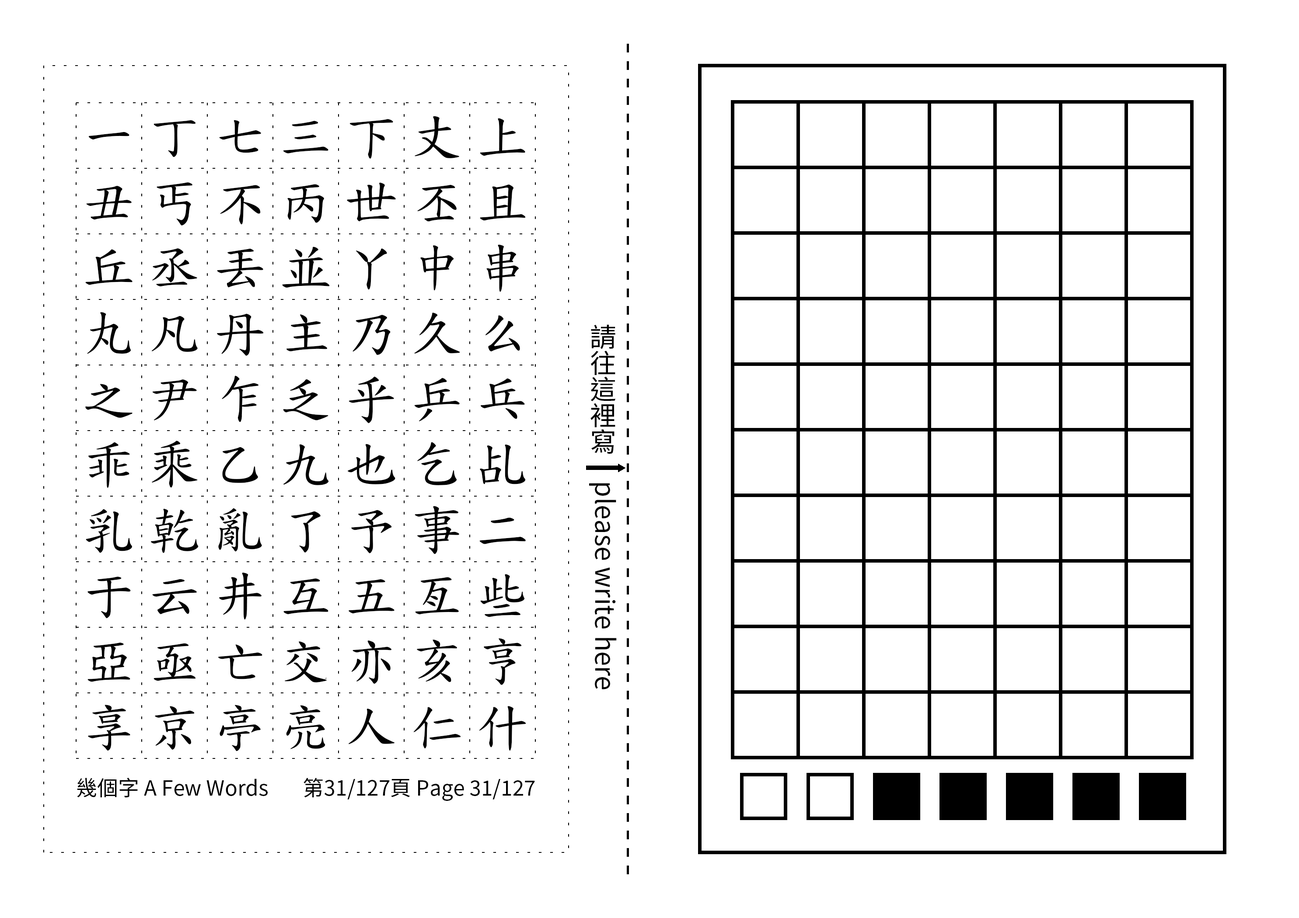
<style>
.page{position:relative;width:1299px;height:918px;background:#ffffff}
.page>*{position:absolute;margin:0}
.t1{font:52.5px/65.6px "TW-Kai-98_1";letter-spacing:0.25em;color:#000000}
.t2{font:26.2px "SourceHanSansTC-Regular";color:#000000}
.t3{font:21px "SourceHanSansTC-Regular";color:#000000}
</style>
<div class="page">
<p class="t1" style="left:85px;top:116px;width:441px;height:636px;text-align:center">一丁七三下丈上丑丐不丙世丕且丘丞丟並丫中串丸凡丹主乃久么之尹乍乏乎乒乓乖乘乙九也乞乩乳乾亂了予事二于云井互五亙些亞亟亡交亦亥亨享京亭亮人仁什</p>
<p class="t2" style="left:589px;top:324px;width:28px;height:366px;text-align:center">請往這裡寫　please write here</p>
<p class="t3" style="left:77px;top:778px;width:191px;height:20px">幾個字 A Few Words</p>
<p class="t3" style="left:303px;top:778px;width:232px;height:23px">第31/127頁 Page 31/127</p>
</div>
